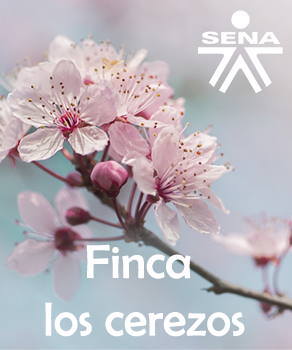
<style>
.page{position:relative;width:292px;height:350px}
.page>*{position:absolute;margin:0}
.t1{font:48px "BerlinSansFB-Reg";color:#ffffff}
</style>
<div class="page">
<p class="t1" style="left:45px;top:244px;width:200px;height:93px;text-align:center">Finca <br>los cerezos</p>
</div>
